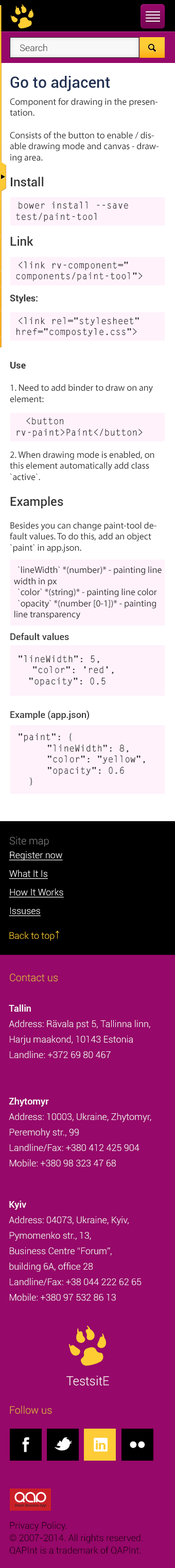
<style>
.page{position:relative;width:175px;height:1568px;background:#960869}
.page>*{position:absolute;margin:0}
.t1{font:9.3px "Roboto-Light";color:#000000}
.t2{font:15.5px "Roboto-Medium";color:#213053}
.t3{font:9.3px "MyriadPro-Regular";color:#333333}
.t4{font:12.4px "Roboto-Medium";color:#333333}
.t5{font:9.3px "LetterGothicStd-Bold";color:#333333}
.t6{font:9.3px "Roboto-Bold";color:#333333}
.t7{font:9.3px "Roboto-Medium";color:#333333}
.t8{font:10.3px "Roboto-Light";color:#7b7b7b}
.t9{font:9.3px/18.6px "Roboto-Light";color:#ffffff;text-decoration:underline}
.t10{font:9.3px "Roboto-Light";color:#fdcb36}
.t11{font:9.3px "ArialMT";color:#fdcb36}
.t12{font:10.3px "Roboto-Light";color:#e4b730}
.t13{font:9.3px/15.5px "Roboto-Light";color:#ffffff}
.t14{font:9.3px/15.5px "Roboto-Medium";color:#ffffff}
.t15{font:12.4px "Roboto-Light";color:#ffffff}
.t16{font:9.3px/12.4px "Roboto-Light";color:#000000}
</style>
<div class="page">
<p class="t1" style="left:20px;top:44px;width:27px;height:8px">Search</p>
<p class="t2" style="left:10px;top:76px;width:100px;height:15px">Go to adjacent</p>
<p class="t3" style="left:10px;top:98px;width:152px;height:688px">Component for drawing in the presentation.<br><br>Consists of the button to enable / disable drawing mode and canvas - drawing area.<br><br><span class="t4">Install<br><br>    </span><span class="t5">bower install --save <br> test/paint-tool<br><br></span><span class="t4">Link<br><br>    </span><span class="t5">&lt;link rv-component="<br> components/paint-tool"&gt;<br>    <br></span><span class="t6">Styles:<br><br>    </span><span class="t5">&lt;link rel="stylesheet" <br> href="compostyle.css"&gt;<br><br><br></span><span class="t6">Use<br></span><br>1. Need to add binder to draw on any element:<br><br>        <span class="t5">&lt;button                          rv-paint&gt;Paint&lt;/button&gt;<br></span><br>2. When drawing mode is enabled, on this element automatically add class `active`.<br>    <br><span class="t4">Examples<br></span><br>Besides you can change paint-tool default values. To do this, add an object `paint` in app.json.<br><br>    `lineWidth` *(number)* - painting line                 width in px<br>    `color` *(string)* - painting line color<br>    `opacity` *(number [0-1])* - painting    line transparency<br><br><span class="t7">Default values<br><br>    </span><span class="t5">"lineWidth": 5,<br>    "color": 'red',<br> "opacity": 0.5<br><br><br></span><span class="t7">Example (app.json)<br><br>    </span><span class="t5">"paint": {<br>     "lineWidth": 8,<br>  "color": "yellow",<br>  "opacity": 0.6<br> }</span></p>
<p class="t8" style="left:10px;top:836px;width:39px;height:10px">Site map</p>
<p class="t9" style="left:9px;top:851px;width:55px;height:65px">Register now<br>What It Is <br>How It Works <br>Issuses</p>
<p class="t10" style="left:9px;top:932px;width:46px;height:9px">Back to top</p>
<p class="t11" style="left:56px;top:931px;width:3px;height:8px">↑</p>
<p class="t12" style="left:10px;top:973px;width:48px;height:9px">Contact us</p>
<p class="t13" style="left:9px;top:1004px;width:143px;height:163px"><span class="t14">Tallin</span><br>Address: Rävala pst 5, Tallinna linn, Harju maakond, 10143 Estonia<br>Landline: +372 69 80 467<br><br><br><span class="t14">Zhytomyr<br></span>Address: 10003, Ukraine, Zhytomyr, Peremohy str., 99<br>Landline/Fax: +380 412 425 904Mobile: +380 98 323 47 68</p>
<p class="t13" style="left:9px;top:1201px;width:132px;height:100px"><span class="t14">Kyiv<br></span>Address: 04073, Ukraine, Kyiv, <br>Pymomenko str., 13, <br>Business Centre “Forum”, <br>building 6A, office 28<br>Landline/Fax: +38 044 222 62 65Mobile: +380 97 532 86 13</p>
<p class="t15" style="left:67px;top:1375px;width:42px;height:11px">TestsitE</p>
<p class="t12" style="left:10px;top:1405px;width:42px;height:9px">Follow us</p>
<p class="t16" style="left:10px;top:1522px;width:133px;height:33px">Privacy Policy.<br>© 2007-2014. All rights reserved. <br>QAPInt is a trademark of QAPInt.</p>
</div>
